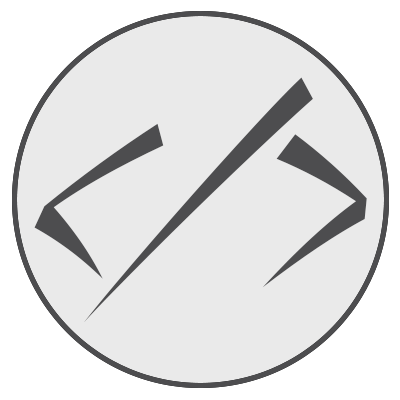
<style>
.page{position:relative;width:400px;height:400px;background:#eaeaea}
.page>*{position:absolute;margin:0}
.t1{font:316.7px "StillTime-Regular";color:#4d4d4f;font-style:italic}
</style>
<div class="page">
<p class="t1" style="left:34px;top:77px;width:333px;height:245px">&lt;/&gt;</p>
</div>
